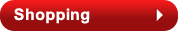
<style>
.page{position:relative;width:178px;height:31px;background:#980e0e}
.page>*{position:absolute;margin:0}
.t1{font:16px "Arial-BoldMT";letter-spacing:0.014em;color:#ffffff}
</style>
<div class="page">
<p class="t1" style="left:14px;top:8px;width:76px;height:16px">Shopping</p>
</div>
